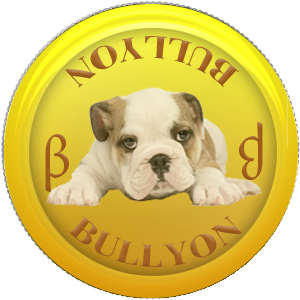
<style>
.page{position:relative;width:300px;height:300px;background:#ffffff}
.page>*{position:absolute;margin:0}
.t1{font:32px "BodoniFLF-Bold";color:#a46221}
.t2{font:60px "MinionPro-Regular";color:#9f5c1b}
</style>
<div class="page">
<p class="t1" style="left:65px;top:36px;width:174px;height:52px;rotate:-180deg">BULLYON</p>
<p class="t2" style="left:239px;top:122px;width:24px;height:58px;rotate:180deg">β</p>
<p class="t2" style="left:45px;top:134px;width:24px;height:58px">β</p>
<p class="t1" style="left:68px;top:215px;width:174px;height:52px">BULLYON</p>
</div>
